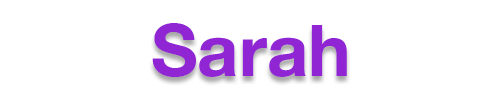
<style>
.page{position:relative;width:500px;height:100px;background:#ffffff}
.page>*{position:absolute;margin:0}
.t1{font:72px "HelveticaNeue-Bold";color:#9025d3}
</style>
<div class="page">
<p class="t1" style="left:152px;top:23px;width:195px;height:54px">Sarah</p>
</div>
